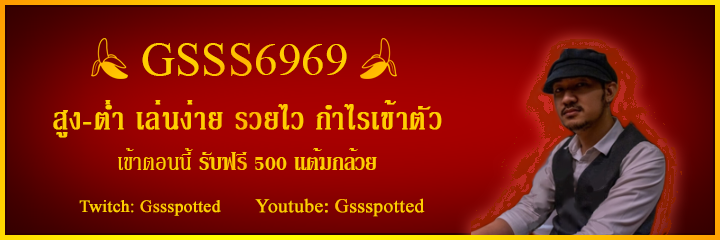
<style>
.page{position:relative;width:720px;height:240px}
.page>*{position:absolute;margin:0}
.t1{font:46.6px "TimesNewRomanPSMT";letter-spacing:0.01em;color:#ffce00}
.t2{font:42px "KodchiangNews";color:#ffce00;font-weight:bold}
.t3{font:32px "KodchiangNews-Bold";color:#ffce00}
.t4{font:32px "KodchiangNews";color:#ffce00}
.t5{font:19px "TimesNewRomanPSMT";color:#ffce00;font-weight:bold}
.t6{font:17.1px "TimesNewRomanPSMT";color:#ffce00;font-weight:bold}
</style>
<div class="page">
<p class="t1" style="left:142px;top:43px;width:205px;height:33px">GSSS6969</p>
<p class="t2" style="left:53px;top:100px;width:389px;height:38px">สูง-ต่ำ เล่นง่าย รวยไว กำไรเข้าตัว</p>
<p class="t3" style="left:118px;top:148px;width:259px;height:22px"><span class="t4">เข้าตอนนี้ </span>รับฟรี 500 แต้มกล้วย</p>
<p class="t5" style="left:255px;top:198px;width:170px;height:19px">Youtube: Gssspotted</p>
<p class="t6" style="left:79px;top:200px;width:142px;height:16px">Twitch: Gssspotted</p>
</div>
